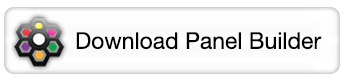
<style>
.page{position:relative;width:350px;height:80px;background:#ffffff}
.page>*{position:absolute;margin:0}
.t1{font:23.1px "HelveticaNeue";color:#000000}
</style>
<div class="page">
<p class="t1" style="left:76px;top:32px;width:246px;height:18px">Download Panel Builder</p>
</div>
